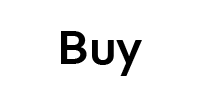
<style>
.page{position:relative;width:197px;height:100px;background:#ffffff}
.page>*{position:absolute;margin:0}
.t1{font:50.8px "Corbel-Bold";color:#000000}
</style>
<div class="page">
<p class="t1" style="left:61px;top:31px;width:81px;height:45px">Buy</p>
</div>
